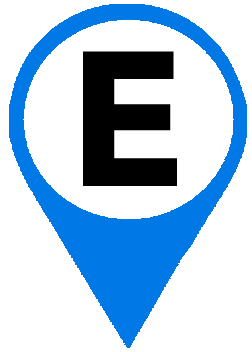
<style>
.page{position:relative;width:252px;height:352px;background:#ffffff}
.page>*{position:absolute;margin:0}
.t1{font:190px "AvenirNext-Bold";color:#000000}
</style>
<div class="page">
<p class="t1" style="left:83px;top:51px;width:94px;height:135px">E</p>
</div>
